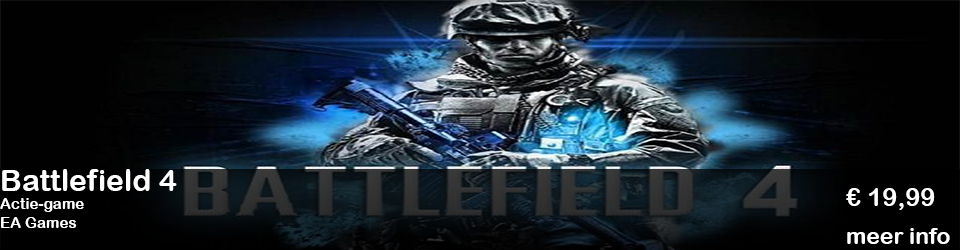
<style>
.page{position:relative;width:960px;height:250px}
.page>*{position:absolute;margin:0}
.t1{font:15.2px "ArialRoundedMTBold";color:#ffffff}
.t2{font:30.5px "ArialRoundedMTBold";color:#ffffff}
.t3{font:25.4px "ArialRoundedMTBold";color:#ffffff}
.t4{font:22.9px "ArialRoundedMTBold";color:#ffffff}
</style>
<div class="page">
<p class="t1" style="left:0px;top:169px;width:177px;height:59px"><span class="t2">Battlefield 4<br></span>Actie-game<br>EA Games</p>
<p class="t3" style="left:846px;top:188px;width:89px;height:22px">€ 19,99</p>
<p class="t4" style="left:847px;top:228px;width:103px;height:16px">meer info</p>
</div>
